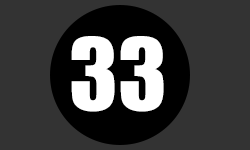
<style>
.page{position:relative;width:250px;height:150px;background:#333333}
.page>*{position:absolute;margin:0}
.t1{font:91.7px "Impact";color:#ffffff}
</style>
<div class="page">
<p class="t1" style="left:71px;top:36px;width:93px;height:76px">33</p>
</div>
